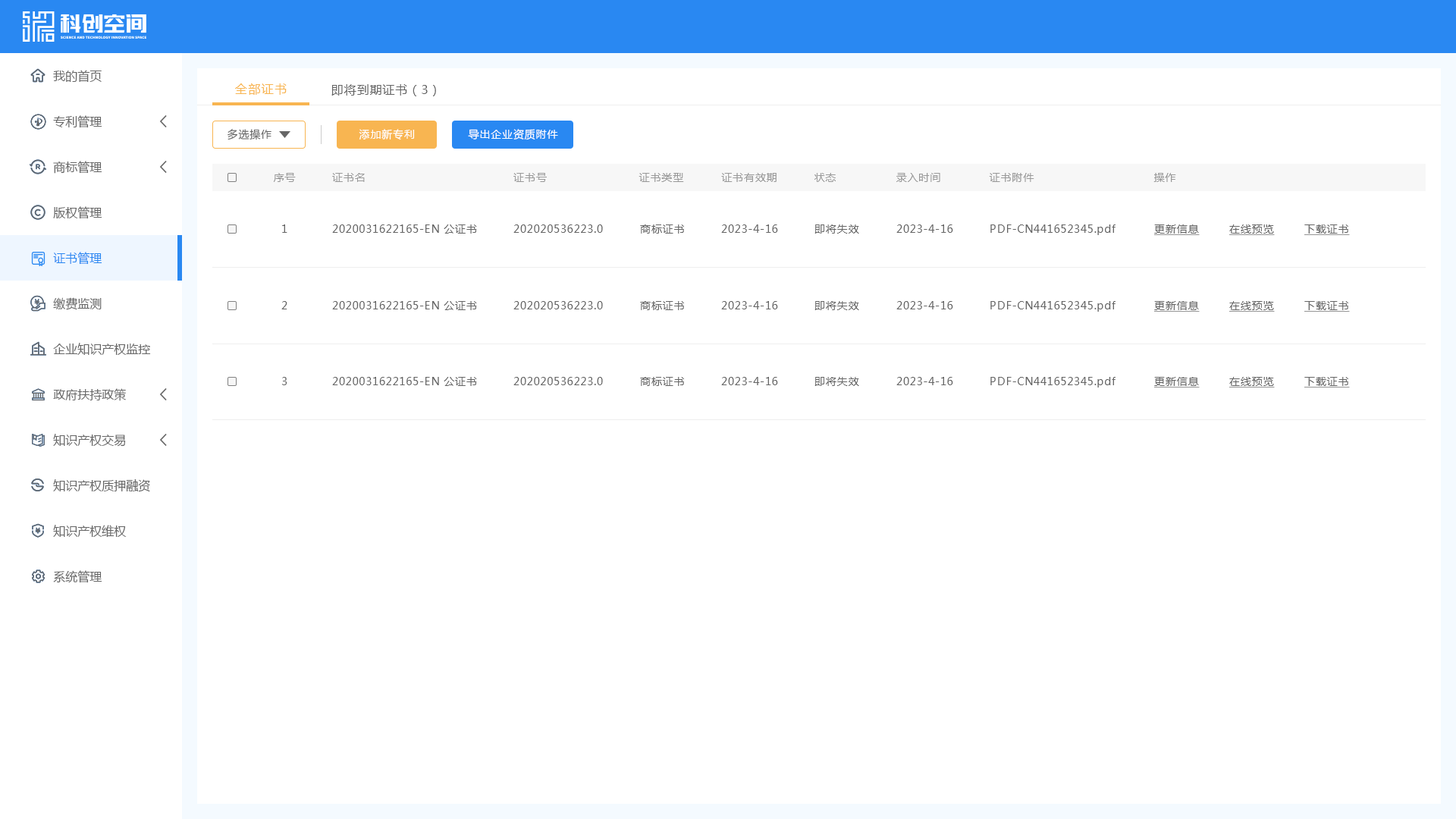
<style>
.page{position:relative;width:1456px;height:819px;background:#ffffff}
.page>*{position:absolute;margin:0}
.t1{font:12.1px "MicrosoftYaHei";color:#666666}
.t2{font:12.1px "MicrosoftYaHei";letter-spacing:0.1em;color:#f8b551}
.t3{font:12.1px "MicrosoftYaHei";letter-spacing:0.06em;color:#666666}
.t4{font:10.6px "MicrosoftYaHei";letter-spacing:0.06em;color:#666666}
.t5{font:10.6px "MicrosoftYaHei";letter-spacing:0.06em;color:#ffffff}
.t6{font:10.6px "MicrosoftYaHei";letter-spacing:0.06em;color:#999999}
.t7{font:10.6px "MicrosoftYaHei";letter-spacing:0.06em;color:#666666;text-decoration:underline}
.t8{font:12.1px "MicrosoftYaHei";color:#2988f2}
</style>
<div class="page">
<p class="t1" style="left:53px;top:70px;width:49px;height:13px">我的首页</p>
<p class="t2" style="left:235px;top:83px;width:52px;height:12px">全部证书</p>
<p class="t3" style="left:331px;top:84px;width:105px;height:12px">即将到期证书（3）</p>
<p class="t1" style="left:53px;top:115px;width:49px;height:13px">专利管理</p>
<p class="t4" style="left:227px;top:129px;width:44px;height:11px">多选操作</p>
<p class="t5" style="left:359px;top:129px;width:56px;height:11px">添加新专利</p>
<p class="t5" style="left:468px;top:129px;width:90px;height:11px">导出企业资质附件</p>
<p class="t1" style="left:53px;top:161px;width:49px;height:13px">商标管理</p>
<p class="t6" style="left:274px;top:173px;width:22px;height:9px">序号</p>
<p class="t6" style="left:332px;top:173px;width:33px;height:9px">证书名</p>
<p class="t6" style="left:513px;top:173px;width:34px;height:9px">证书号</p>
<p class="t6" style="left:639px;top:173px;width:45px;height:9px">证书类型</p>
<p class="t6" style="left:721px;top:173px;width:56px;height:9px">证书有效期</p>
<p class="t6" style="left:814px;top:173px;width:22px;height:9px">状态</p>
<p class="t6" style="left:896px;top:173px;width:44px;height:9px">录入时间</p>
<p class="t6" style="left:989px;top:173px;width:45px;height:9px">证书附件</p>
<p class="t6" style="left:1153px;top:173px;width:23px;height:9px">操作</p>
<p class="t1" style="left:53px;top:206px;width:49px;height:13px">版权管理</p>
<p class="t4" style="left:282px;top:224px;width:5px;height:9px">1</p>
<p class="t4" style="left:332px;top:224px;width:145px;height:10px">2020031622165-EN 公证书</p>
<p class="t4" style="left:513px;top:224px;width:90px;height:9px">202020536223.0</p>
<p class="t4" style="left:640px;top:224px;width:44px;height:10px">商标证书</p>
<p class="t4" style="left:721px;top:224px;width:57px;height:9px">2023-4-16</p>
<p class="t4" style="left:814px;top:224px;width:45px;height:10px">即将失效</p>
<p class="t4" style="left:896px;top:224px;width:57px;height:9px">2023-4-16</p>
<p class="t4" style="left:990px;top:224px;width:125px;height:11px">PDF-CN441652345.pdf</p>
<p class="t7" style="left:1154px;top:224px;width:46px;height:11px">更新信息</p>
<p class="t7" style="left:1229px;top:224px;width:46px;height:11px">在线预览</p>
<p class="t7" style="left:1304px;top:224px;width:46px;height:11px">下载证书</p>
<p class="t8" style="left:53px;top:252px;width:49px;height:13px">证书管理</p>
<p class="t1" style="left:53px;top:297px;width:49px;height:13px">缴费监测</p>
<p class="t4" style="left:281px;top:301px;width:6px;height:8px">2</p>
<p class="t4" style="left:332px;top:301px;width:145px;height:9px">2020031622165-EN 公证书</p>
<p class="t4" style="left:513px;top:301px;width:90px;height:8px">202020536223.0</p>
<p class="t4" style="left:640px;top:301px;width:44px;height:9px">商标证书</p>
<p class="t4" style="left:721px;top:301px;width:57px;height:8px">2023-4-16</p>
<p class="t4" style="left:814px;top:301px;width:45px;height:9px">即将失效</p>
<p class="t4" style="left:896px;top:301px;width:57px;height:8px">2023-4-16</p>
<p class="t4" style="left:990px;top:301px;width:125px;height:11px">PDF-CN441652345.pdf</p>
<p class="t7" style="left:1154px;top:301px;width:46px;height:11px">更新信息</p>
<p class="t7" style="left:1229px;top:301px;width:46px;height:11px">在线预览</p>
<p class="t7" style="left:1304px;top:301px;width:46px;height:11px">下载证书</p>
<p class="t1" style="left:53px;top:343px;width:98px;height:12px">企业知识产权监控</p>
<p class="t4" style="left:282px;top:377px;width:5px;height:8px">3</p>
<p class="t4" style="left:332px;top:377px;width:145px;height:9px">2020031622165-EN 公证书</p>
<p class="t4" style="left:513px;top:377px;width:90px;height:8px">202020536223.0</p>
<p class="t4" style="left:640px;top:377px;width:44px;height:9px">商标证书</p>
<p class="t4" style="left:721px;top:377px;width:57px;height:8px">2023-4-16</p>
<p class="t4" style="left:814px;top:377px;width:45px;height:9px">即将失效</p>
<p class="t4" style="left:896px;top:377px;width:57px;height:8px">2023-4-16</p>
<p class="t4" style="left:990px;top:377px;width:125px;height:11px">PDF-CN441652345.pdf</p>
<p class="t7" style="left:1154px;top:377px;width:46px;height:11px">更新信息</p>
<p class="t7" style="left:1229px;top:377px;width:46px;height:11px">在线预览</p>
<p class="t7" style="left:1304px;top:377px;width:46px;height:11px">下载证书</p>
<p class="t1" style="left:53px;top:388px;width:73px;height:13px">政府扶持政策</p>
<p class="t1" style="left:53px;top:434px;width:73px;height:13px">知识产权交易</p>
<p class="t1" style="left:53px;top:479px;width:97px;height:13px">知识产权质押融资</p>
<p class="t1" style="left:53px;top:525px;width:74px;height:13px">知识产权维权</p>
<p class="t1" style="left:53px;top:570px;width:49px;height:13px">系统管理</p>
</div>
